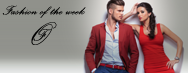
<style>
.page{position:relative;width:188px;height:73px}
.page>*{position:absolute;margin:0}
.t1{font:16px "PalaceScriptMT";letter-spacing:0.025em;color:#000000}
.t2{font:40.4px "PalaceScriptMT";letter-spacing:0.025em;color:#000000}
.t3{font:20.7px "PalaceScriptMT";letter-spacing:0.025em;color:#000000}
</style>
<div class="page">
<p class="t1" style="left:2px;top:5px;width:84px;height:13px">Fashion of the week</p>
<p class="t2" style="left:31px;top:22px;width:26px;height:23px">O</p>
<p class="t3" style="left:33px;top:29px;width:19px;height:12px">F</p>
</div>
